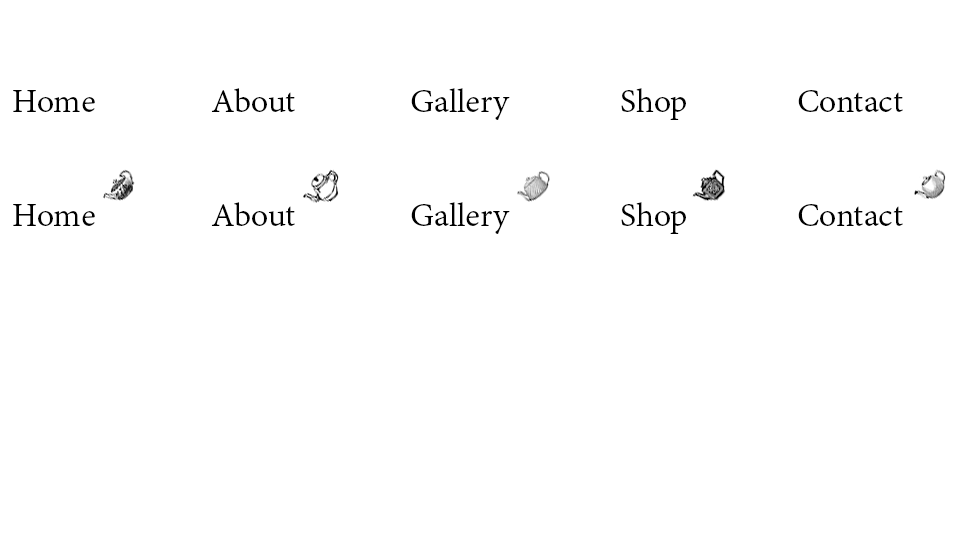
<style>
.page{position:relative;width:960px;height:553px;background:#ffffff}
.page>*{position:absolute;margin:0}
.t1{font:36px "AdobeGurmukhi-Regular";color:#000000}
</style>
<div class="page">
<p class="t1" style="left:211px;top:88px;width:84px;height:24px">About</p>
<p class="t1" style="left:411px;top:88px;width:99px;height:32px">Gallery</p>
<p class="t1" style="left:621px;top:88px;width:65px;height:32px">Shop</p>
<p class="t1" style="left:13px;top:90px;width:82px;height:22px">Home</p>
<p class="t1" style="left:798px;top:90px;width:105px;height:22px">Contact</p>
<p class="t1" style="left:13px;top:204px;width:82px;height:22px">Home</p>
<p class="t1" style="left:211px;top:202px;width:84px;height:24px">About</p>
<p class="t1" style="left:411px;top:202px;width:99px;height:32px">Gallery</p>
<p class="t1" style="left:621px;top:202px;width:65px;height:32px">Shop</p>
<p class="t1" style="left:798px;top:204px;width:105px;height:22px">Contact</p>
</div>
